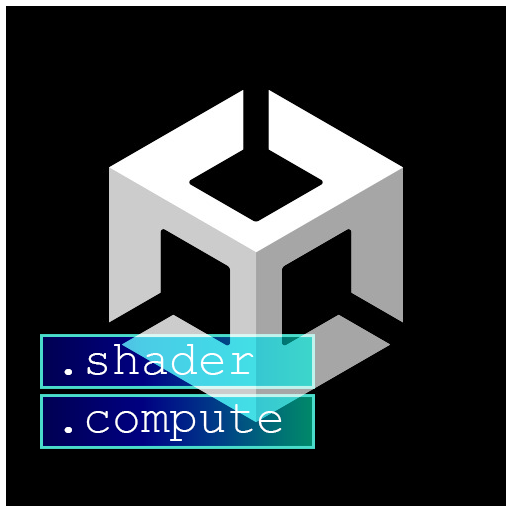
<style>
.page{position:relative;width:512px;height:512px;background:#000000}
.page>*{position:absolute;margin:0}
.t1{font:48px "CourierNewPSMT";color:#ffffff}
</style>
<div class="page">
<p class="t1" style="left:64px;top:344px;width:218px;height:97px">.shader<br>.compute</p>
</div>
